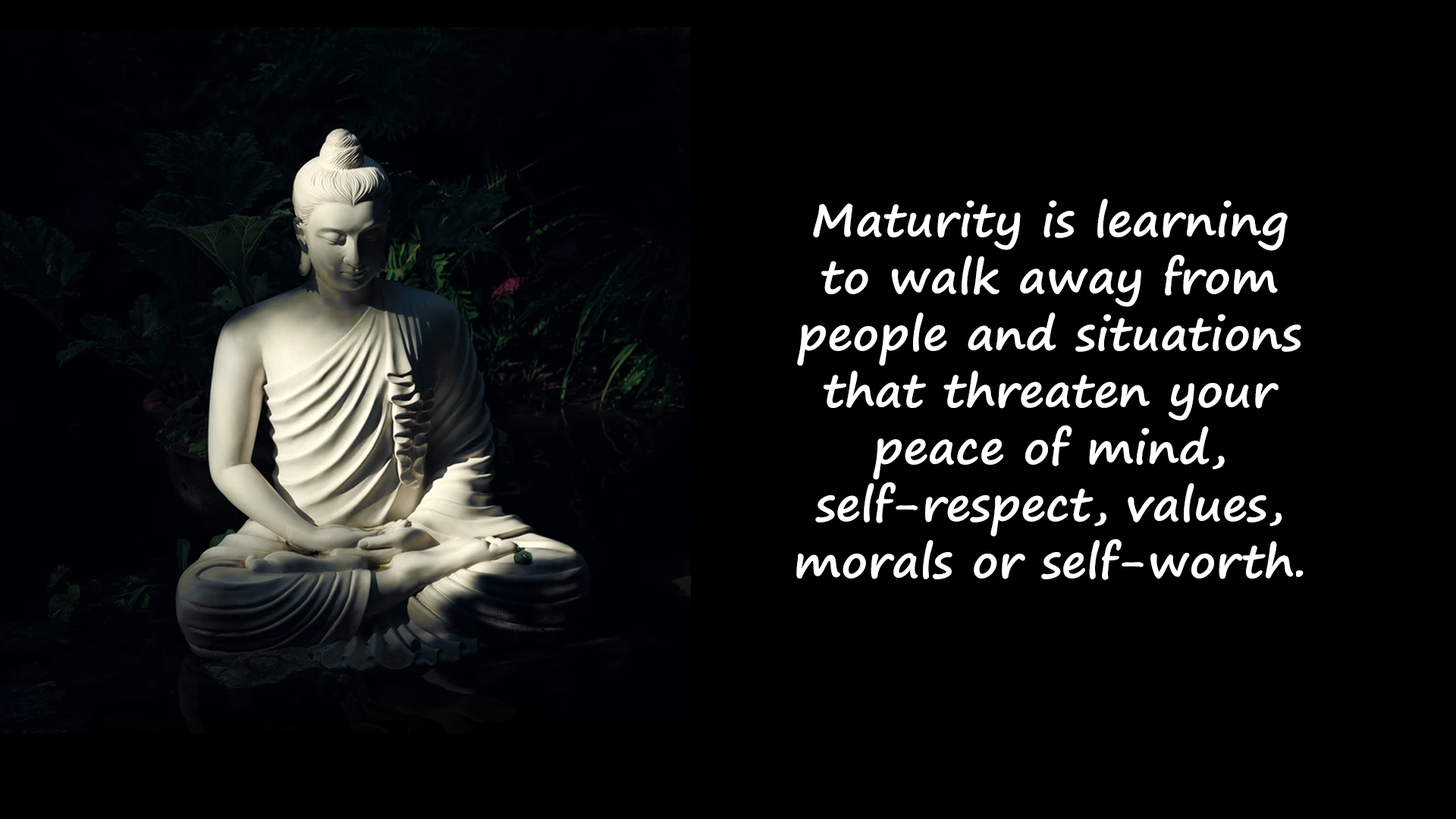
<style>
.page{position:relative;width:1456px;height:819px;background:#000000}
.page>*{position:absolute;margin:0}
.t1{font:45px "SegoePrint-Bold";color:#ffffff;scale:1.05 1}
</style>
<div class="page">
<p class="t1" style="left:796px;top:199px;width:508px;height:381px;text-align:center">Maturity is learning to walk away from people and situations that threaten your peace of mind, self-respect, values, morals or self-worth.</p>
</div>
